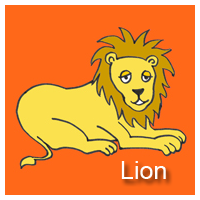
<style>
.page{position:relative;width:200px;height:200px;background:#ff6819}
.page>*{position:absolute;margin:0}
.t1{font:25px "ArialMT";color:#ffffff}
</style>
<div class="page">
<p class="t1" style="left:121px;top:161px;width:45px;height:18px">Lion</p>
</div>
